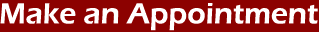
<style>
.page{position:relative;width:319px;height:32px;background:#8c0100}
.page>*{position:absolute;margin:0}
.t1{font:30px "ErasITC-Demi";color:#ffffff}
</style>
<div class="page">
<p class="t1" style="left:0px;top:3px;width:318px;height:28px">Make an Appointment</p>
</div>
